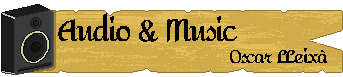
<style>
.page{position:relative;width:343px;height:77px;background:#cfab49}
.page>*{position:absolute;margin:0}
.t1{font:30px "God'sChoice-Bold";letter-spacing:-0.065em;color:#000000}
.t2{font:18px "God'sChoice-Bold";letter-spacing:-0.065em;color:#000000}
</style>
<div class="page">
<p class="t1" style="left:58px;top:13px;width:179px;height:29px">Audio  &amp;  Music</p>
<p class="t2" style="left:230px;top:48px;width:97px;height:15px">Oscar  LLeixà</p>
</div>
